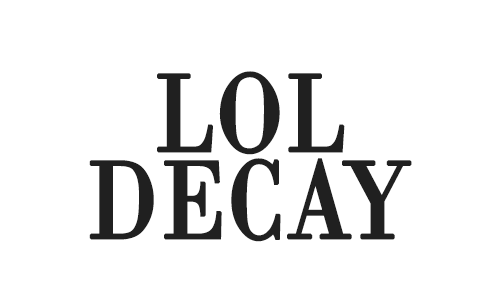
<style>
.page{position:relative;width:500px;height:300px;background:#ffffff}
.page>*{position:absolute;margin:0}
.t1{font:116.6px "BodoniMT";color:#202020;font-weight:bold;scale:0.8 1}
</style>
<div class="page">
<p class="t1" style="left:157px;top:71px;width:188px;height:84px">LOL</p>
<p class="t1" style="left:89px;top:158px;width:323px;height:84px">DECAY</p>
</div>
